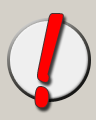
<style>
.page{position:relative;width:96px;height:120px;background:#d4d0c8}
.page>*{position:absolute;margin:0}
.t1{font:130px "BrushScriptStd";color:#ff0000}
</style>
<div class="page">
<p class="t1" style="left:34px;top:13px;width:30px;height:96px;rotate:-12deg">!</p>
</div>
